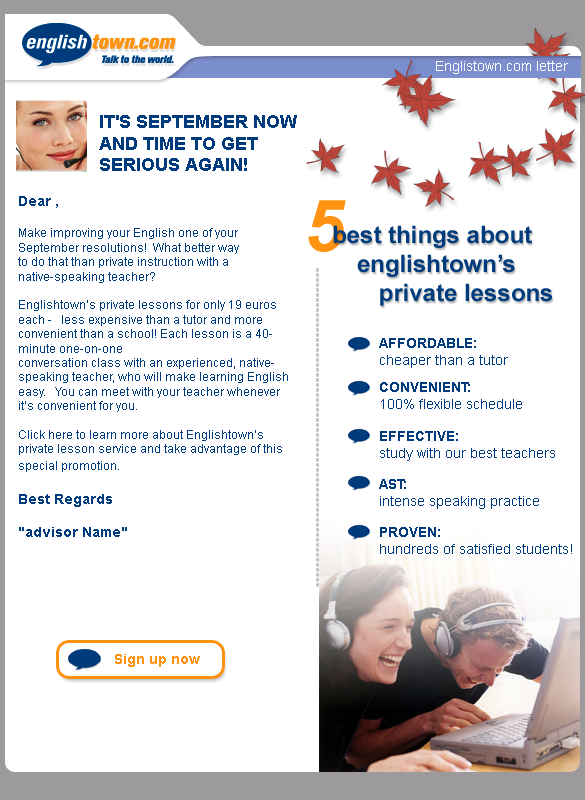
<style>
.page{position:relative;width:585px;height:800px;background:#ffffff}
.page>*{position:absolute;margin:0}
.t1{font:14px "ArialMT";color:#ffffff}
.t2{font:18px "Arial-BoldMT";color:#003c7b}
.t3{font:12px "ArialMT";color:#003c7b}
.t4{font:14px "Arial-BoldMT";color:#003c7b}
.t5{font:72px "Arial-BoldItalicMT";color:#ff9210}
.t6{font:24px "Arial-BoldMT";color:#003c7b}
.t7{font:24px "ArialMT";color:#003c7b}
.t8{font:14px "ArialMT";color:#003c7b}
.t9{font:14px "Arial-BoldMT";color:#ff9210}
</style>
<div class="page">
<p class="t1" style="left:436px;top:61px;width:132px;height:13px">Englistown.com letter</p>
<p class="t2" style="left:99px;top:115px;width:198px;height:56px">IT'S SEPTEMBER NOW <br>AND TIME TO GET <br>SERIOUS AGAIN!</p>
<p class="t3" style="left:18px;top:196px;width:270px;height:341px"><span class="t4">Dear ,<br><br></span>Make improving your English one of your <br>September resolutions!  What better way<br>to do that than private instruction with a <br>native-speaking teacher?  <br><br>Englishtown’s private lessons for only 19 euros each -   less expensive than a tutor and more convenient than a school! Each lesson is a 40-minute one-on-one <br>conversation class with an experienced, native-speaking teacher, who will make learning English easy.   You can meet with your teacher whenever it’s convenient for you.  <br><br>Click here to learn more about Englishtown’s private lesson service and take advantage of this special promotion.<br><span class="t4"> <br>Best Regards<br><br>"advisor Name"</span></p>
<p class="t5" style="left:308px;top:200px;width:38px;height:52px">5</p>
<p class="t6" style="left:333px;top:225px;width:219px;height:81px"><span class="t7">  </span> best things about <br>      englishtown’s<br>          private lessons</p>
<p class="t8" style="left:379px;top:338px;width:129px;height:30px"><span class="t4">AFFORDABLE: <br></span>cheaper than a tutor</p>
<p class="t8" style="left:380px;top:382px;width:142px;height:27px"><span class="t4">CONVENIENT: <br></span>100% flexible schedule</p>
<p class="t8" style="left:380px;top:431px;width:175px;height:30px"><span class="t4">EFFECTIVE: <br></span>study with our best teachers</p>
<p class="t8" style="left:379px;top:479px;width:160px;height:30px"><span class="t4">AST: <br></span>intense speaking practice</p>
<p class="t8" style="left:380px;top:527px;width:192px;height:27px"><span class="t4">PROVEN: <br></span>hundreds of satisfied students!</p>
<p class="t9" style="left:115px;top:654px;width:85px;height:13px">Sign up now</p>
</div>
